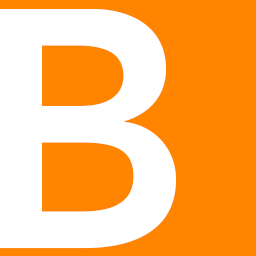
<style>
.page{position:relative;width:256px;height:256px;background:#ff8400}
.page>*{position:absolute;margin:0}
.t1{font:337.7px "AvenirLTStd-Heavy";color:#fefefe}
</style>
<div class="page">
<p class="t1" style="left:0px;top:9px;width:176px;height:240px">B</p>
</div>
